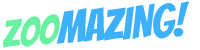
<style>
.page{position:relative;width:200px;height:50px;background:#ffffff}
.page>*{position:absolute;margin:0}
.t1{font:45.2px "Bangers-Regular";letter-spacing:-0.01em;color:#3db1ff}
.t2{font:39.6px "Bangers-Regular";letter-spacing:-0.01em;color:#69f0a1}
</style>
<div class="page">
<p class="t1" style="left:3px;top:1px;width:187px;height:47px;rotate:-4deg"><span class="t2">ZOO</span>MAZING!</p>
</div>
